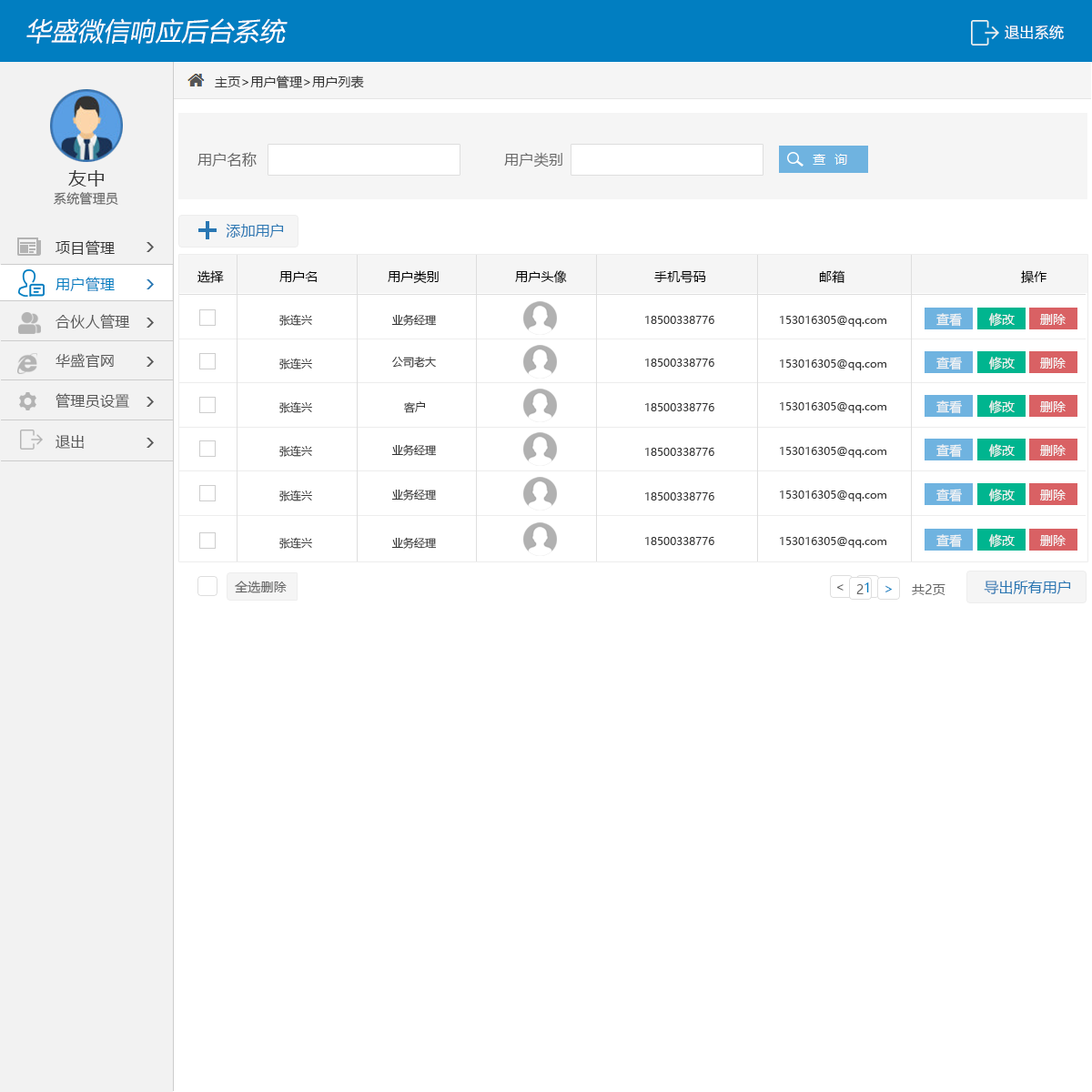
<style>
.page{position:relative;width:1092px;height:1092px;background:#ffffff}
.page>*{position:absolute;margin:0}
.t1{font:25.5px "MicrosoftYaHei";letter-spacing:0.02em;color:#ffffff;font-style:italic}
.t2{font:14.6px "MicrosoftYaHei";letter-spacing:0.02em;color:#ffffff}
.t3{font:12.7px "MicrosoftYaHei";letter-spacing:0.02em;color:#333333}
.t4{font:14.6px "MicrosoftYaHei";letter-spacing:0.02em;color:#666666}
.t5{font:18.2px "MicrosoftYaHei";letter-spacing:0.02em;color:#333333}
.t6{font:12.7px "MicrosoftYaHei";letter-spacing:0.02em;color:#666666}
.t7{font:14.6px "MicrosoftYaHei";color:#2977b3}
.t8{font:14.6px "MicrosoftYaHei";letter-spacing:0.02em;color:#333333}
.t9{font:14.6px "MicrosoftYaHei";letter-spacing:0.02em;color:#017ec1}
.t10{font:12.7px "MicrosoftYaHei";letter-spacing:0.02em;color:#000000}
.t11{font:14.6px "MicrosoftYaHei";letter-spacing:0.02em;color:#585858}
.t12{font:10.9px "MicrosoftYaHei";color:#333333}
.t13{font:12.7px "MicrosoftYaHei";color:#f5f5f5}
.t14{font:12.7px "MicrosoftYaHei";letter-spacing:0.02em;color:#017ec1}
.t15{font:13.1px "MicrosoftYaHei";letter-spacing:0.02em;color:#017ec1}
</style>
<div class="page">
<p class="t1" style="left:26px;top:18px;width:262px;height:26px">华盛微信响应后台系统</p>
<p class="t2" style="left:1005px;top:25px;width:59px;height:15px">退出系统</p>
<p class="t3" style="left:215px;top:76px;width:149px;height:12px">主页&gt;用户管理&gt;用户列表</p>
<p class="t4" style="left:197px;top:152px;width:60px;height:15px">用户名称</p>
<p class="t4" style="left:504px;top:152px;width:58px;height:15px">用户类别</p>
<p class="t5" style="left:68px;top:170px;width:36px;height:17px">友中</p>
<p class="t6" style="left:54px;top:192px;width:64px;height:14px">系统管理员</p>
<p class="t7" style="left:226px;top:224px;width:58px;height:14px">添加用户</p>
<p class="t8" style="left:56px;top:240px;width:59px;height:15px">项目管理</p>
<p class="t9" style="left:56px;top:277px;width:59px;height:14px">用户管理</p>
<p class="t10" style="left:197px;top:270px;width:27px;height:13px">选择</p>
<p class="t10" style="left:279px;top:271px;width:38px;height:11px">用户名</p>
<p class="t10" style="left:388px;top:270px;width:51px;height:14px">用户类别</p>
<p class="t10" style="left:515px;top:270px;width:52px;height:13px">用户头像</p>
<p class="t10" style="left:654px;top:270px;width:52px;height:13px">手机号码</p>
<p class="t10" style="left:819px;top:270px;width:26px;height:13px">邮箱</p>
<p class="t10" style="left:1021px;top:270px;width:26px;height:14px">操作</p>
<p class="t11" style="left:56px;top:314px;width:74px;height:15px">合伙人管理</p>
<p class="t12" style="left:279px;top:314px;width:33px;height:12px">张连兴</p>
<p class="t12" style="left:392px;top:314px;width:45px;height:12px">业务经理</p>
<p class="t12" style="left:645px;top:316px;width:69px;height:8px">18500338776</p>
<p class="t12" style="left:780px;top:316px;width:106px;height:11px">153016305@qq.com</p>
<p class="t13" style="left:936px;top:313px;width:26px;height:14px">查看</p>
<p class="t13" style="left:989px;top:313px;width:26px;height:14px">修改</p>
<p class="t13" style="left:1040px;top:314px;width:26px;height:11px">删除</p>
<p class="t11" style="left:56px;top:353px;width:58px;height:15px">华盛官网</p>
<p class="t12" style="left:279px;top:358px;width:33px;height:11px">张连兴</p>
<p class="t12" style="left:392px;top:356px;width:44px;height:12px">公司老大</p>
<p class="t12" style="left:645px;top:359px;width:69px;height:8px">18500338776</p>
<p class="t12" style="left:780px;top:359px;width:106px;height:11px">153016305@qq.com</p>
<p class="t13" style="left:936px;top:357px;width:26px;height:13px">查看</p>
<p class="t13" style="left:989px;top:357px;width:26px;height:13px">修改</p>
<p class="t13" style="left:1040px;top:358px;width:26px;height:11px">删除</p>
<p class="t11" style="left:56px;top:393px;width:73px;height:16px">管理员设置</p>
<p class="t12" style="left:279px;top:401px;width:33px;height:12px">张连兴</p>
<p class="t12" style="left:404px;top:401px;width:21px;height:12px">客户</p>
<p class="t13" style="left:936px;top:400px;width:26px;height:14px">查看</p>
<p class="t13" style="left:989px;top:400px;width:26px;height:14px">修改</p>
<p class="t13" style="left:1040px;top:401px;width:26px;height:11px">删除</p>
<p class="t12" style="left:645px;top:403px;width:69px;height:8px">18500338776</p>
<p class="t12" style="left:780px;top:402px;width:106px;height:11px">153016305@qq.com</p>
<p class="t11" style="left:56px;top:435px;width:28px;height:14px">退出</p>
<p class="t12" style="left:279px;top:445px;width:33px;height:12px">张连兴</p>
<p class="t12" style="left:392px;top:444px;width:45px;height:12px">业务经理</p>
<p class="t12" style="left:645px;top:448px;width:69px;height:8px">18500338776</p>
<p class="t12" style="left:780px;top:447px;width:106px;height:11px">153016305@qq.com</p>
<p class="t13" style="left:936px;top:444px;width:26px;height:14px">查看</p>
<p class="t13" style="left:989px;top:444px;width:26px;height:14px">修改</p>
<p class="t13" style="left:1040px;top:445px;width:26px;height:11px">删除</p>
<p class="t12" style="left:279px;top:490px;width:33px;height:11px">张连兴</p>
<p class="t12" style="left:392px;top:489px;width:45px;height:11px">业务经理</p>
<p class="t12" style="left:645px;top:492px;width:69px;height:8px">18500338776</p>
<p class="t12" style="left:780px;top:490px;width:106px;height:11px">153016305@qq.com</p>
<p class="t13" style="left:936px;top:489px;width:26px;height:13px">查看</p>
<p class="t13" style="left:989px;top:489px;width:26px;height:13px">修改</p>
<p class="t13" style="left:1040px;top:490px;width:26px;height:10px">删除</p>
<p class="t12" style="left:279px;top:537px;width:33px;height:12px">张连兴</p>
<p class="t12" style="left:392px;top:537px;width:45px;height:12px">业务经理</p>
<p class="t12" style="left:645px;top:537px;width:69px;height:8px">18500338776</p>
<p class="t12" style="left:780px;top:537px;width:106px;height:11px">153016305@qq.com</p>
<p class="t13" style="left:936px;top:534px;width:26px;height:14px">查看</p>
<p class="t13" style="left:989px;top:534px;width:26px;height:14px">修改</p>
<p class="t13" style="left:1040px;top:535px;width:26px;height:11px">删除</p>
<p class="t6" style="left:235px;top:581px;width:52px;height:12px">全选删除</p>
<p class="t7" style="left:984px;top:581px;width:87px;height:13px">导出所有用户</p>
<p class="t6" style="left:836px;top:584px;width:8px;height:7px">&lt;</p>
<p class="t6" style="left:856px;top:584px;width:8px;height:10px">2</p>
<p class="t14" style="left:864px;top:582px;width:5px;height:10px">1</p>
<p class="t15" style="left:885px;top:585px;width:7px;height:7px;rotate:180deg">&lt;</p>
<p class="t6" style="left:912px;top:584px;width:33px;height:11px">共2页</p>
</div>
